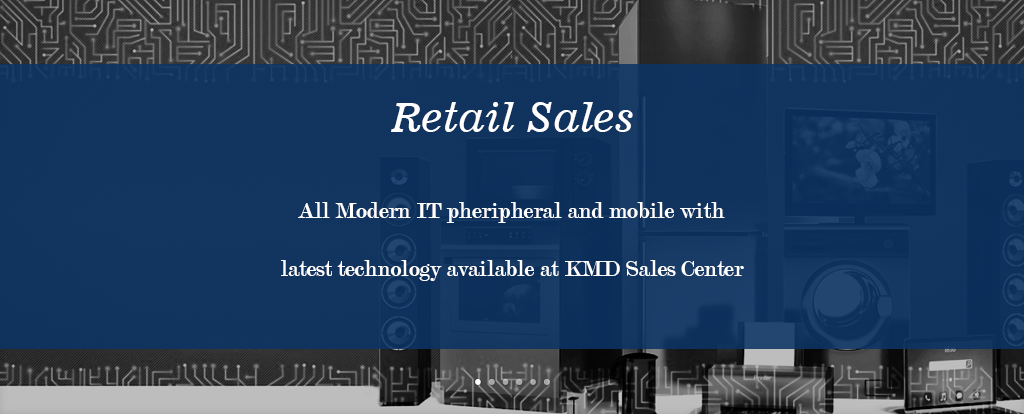
<style>
.page{position:relative;width:1024px;height:414px}
.page>*{position:absolute;margin:0}
.t1{font:40px "News701BT-ItalicA";color:#ffffff}
.t2{font:24px "Modern-Regular";color:#ffffff}
</style>
<div class="page">
<p class="t1" style="left:391px;top:102px;width:242px;height:30px">Retail Sales</p>
<p class="t2" style="left:281px;top:202px;width:463px;height:79px">All Modern IT pheripheral and mobile with<br><br>latest technology available at KMD Sales Center</p>
</div>
